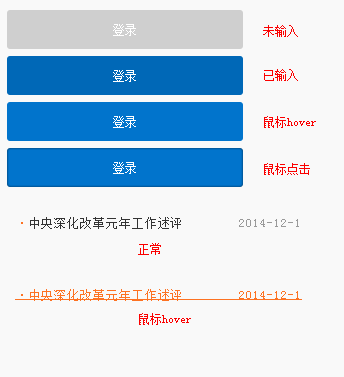
<style>
.page{position:relative;width:344px;height:377px;background:#f9f9f9}
.page>*{position:absolute;margin:0}
.t1{font:12.4px "SimSun";color:#ffffff}
.t2{font:12px "SimSun";color:#fb0000}
.t3{font:12px "SimSun";letter-spacing:0.075em;color:#333333}
.t4{font:12px "SimSun";letter-spacing:0.075em;color:#fd7222}
.t5{font:12px "SimSun";letter-spacing:0.075em;color:#999999}
.t6{font:12px "SimSun";letter-spacing:0.075em;color:#fd7222;text-decoration:underline}
</style>
<div class="page">
<p class="t1" style="left:113px;top:24px;width:23px;height:12px">登录</p>
<p class="t2" style="left:263px;top:25px;width:35px;height:12px">未输入</p>
<p class="t1" style="left:113px;top:70px;width:23px;height:12px">登录</p>
<p class="t2" style="left:264px;top:69px;width:34px;height:12px">已输入</p>
<p class="t1" style="left:113px;top:116px;width:23px;height:12px">登录</p>
<p class="t2" style="left:264px;top:116px;width:52px;height:12px">鼠标hover</p>
<p class="t1" style="left:113px;top:162px;width:23px;height:12px">登录</p>
<p class="t2" style="left:264px;top:163px;width:46px;height:12px">鼠标点击</p>
<p class="t3" style="left:21px;top:217px;width:278px;height:12px"><span class="t4">·</span>中央深化改革元年工作述评    <span class="t5">2014-12-1</span></p>
<p class="t2" style="left:138px;top:243px;width:23px;height:12px">正常</p>
<p class="t6" style="left:15px;top:289px;width:287px;height:12px">·中央深化改革元年工作述评    2014-12-1</p>
<p class="t2" style="left:139px;top:313px;width:52px;height:12px">鼠标hover</p>
</div>
